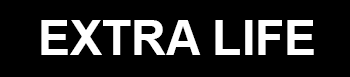
<style>
.page{position:relative;width:350px;height:77px;background:#000000}
.page>*{position:absolute;margin:0}
.t1{font:48px "Arial-BoldMT";color:#ffffff}
</style>
<div class="page">
<p class="t1" style="left:41px;top:20px;width:273px;height:35px">EXTRA LIFE</p>
</div>
